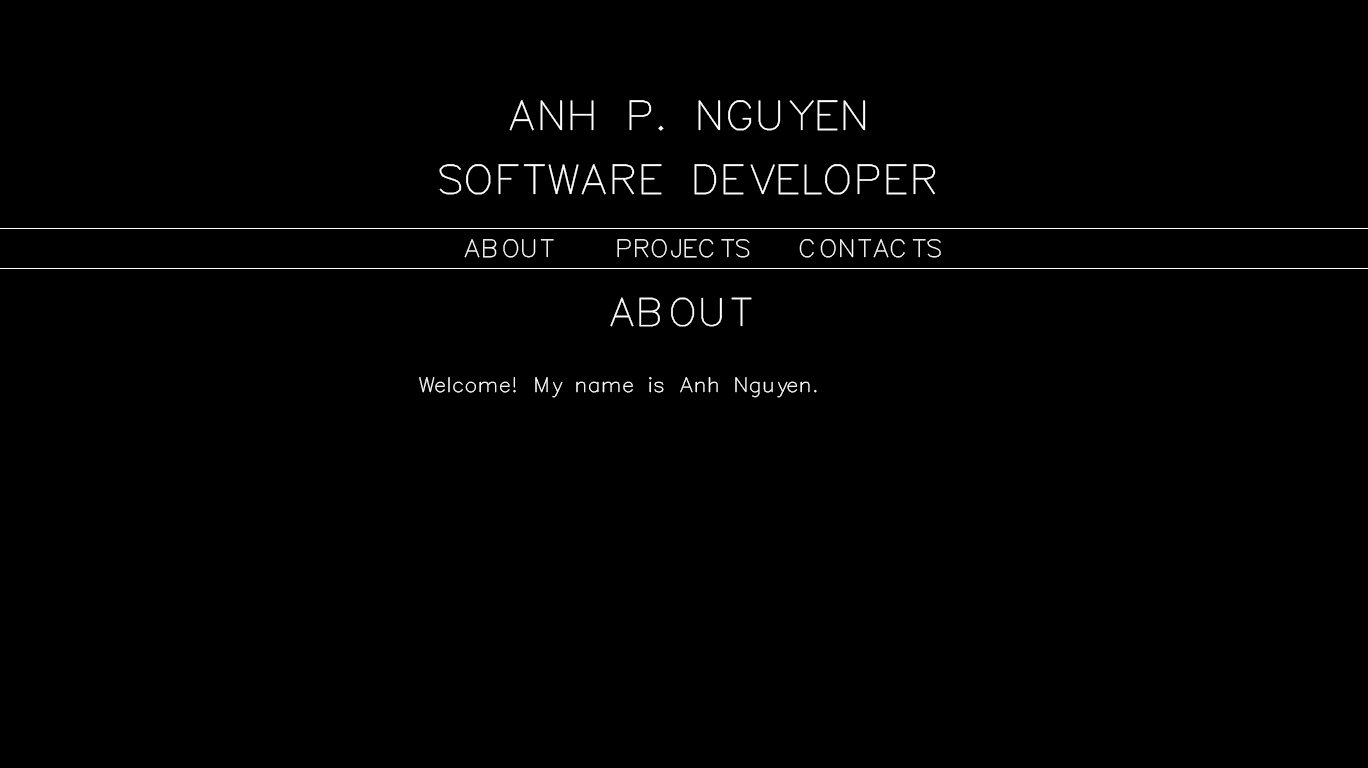
<style>
.page{position:relative;width:1368px;height:768px;background:#000000}
.page>*{position:absolute;margin:0}
.t1{font:40px "Simplex_IV25";color:#ffffff}
.t2{font:24px "Simplex_IV25";color:#ffffff}
.t3{font:38px "Simplex_IV25";color:#ffffff}
.t4{font:20px "Simplex_IV25";color:#ffffff}
</style>
<div class="page">
<p class="t1" style="left:509px;top:100px;width:357px;height:31px">ANH P. NGUYEN</p>
<p class="t1" style="left:439px;top:164px;width:497px;height:31px">SOFTWARE DEVELOPER</p>
<p class="t2" style="left:464px;top:239px;width:90px;height:19px">ABOUT</p>
<p class="t2" style="left:617px;top:239px;width:133px;height:19px">PROJECTS</p>
<p class="t2" style="left:799px;top:239px;width:142px;height:19px">CONTACTS</p>
<p class="t3" style="left:610px;top:297px;width:142px;height:30px">ABOUT</p>
<p class="t4" style="left:419px;top:377px;width:398px;height:21px">Welcome! My name is Anh Nguyen.</p>
</div>
